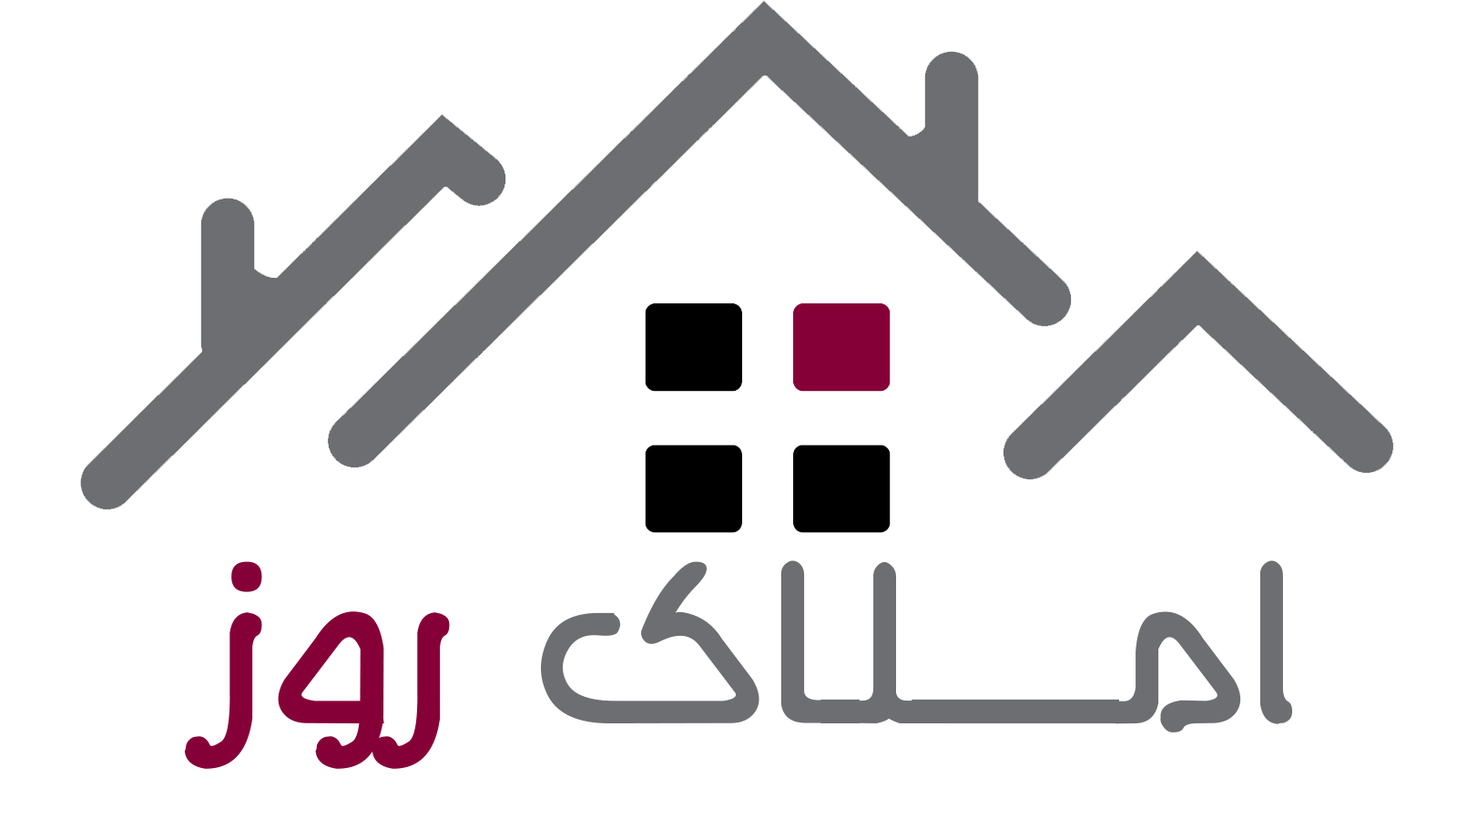
<style>
.page{position:relative;width:1457px;height:819px;background:#ffffff}
.page>*{position:absolute;margin:0}
.t1{font:283.4px "Mj_Aman-";color:#6d6e71}
.t2{font:283.4px "Mj_Aman-";color:#860038}
</style>
<div class="page">
<p class="t1" style="left:184px;top:560px;width:1108px;height:208px">امــــــلـاک <span class="t2">روز</span></p>
</div>
